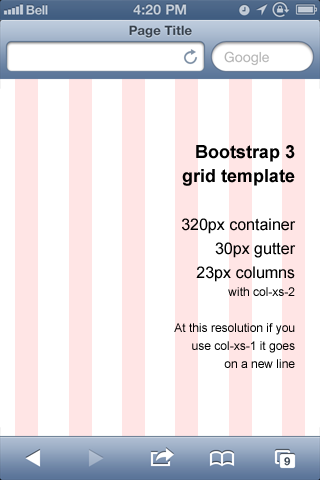
<style>
.page{position:relative;width:320px;height:480px;background:#ffffff}
.page>*{position:absolute;margin:0}
.t1{font:12px/18px "ArialMT";color:#000000}
.t2{font:18px/24px "Arial-BoldMT";color:#000000}
.t3{font:16px/24px "ArialMT";color:#000000}
</style>
<div class="page">
<p class="t1" style="left:174px;top:145px;width:122px;height:223px;text-align:right"><span class="t2">Bootstrap 3<br>grid template<br><br></span><span class="t3">320px container<br>30px gutter<br>23px columns<br></span>with col-xs-2<br><br>At this resolution if you use col-xs-1 it goes<br>on a new line</p>
</div>
